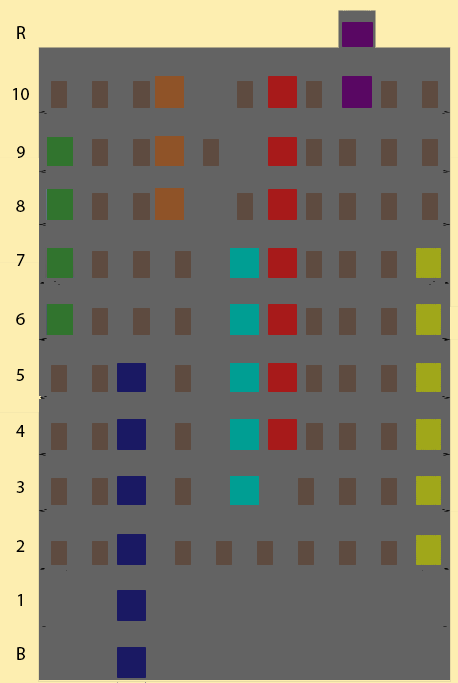
<style>
.page{position:relative;width:458px;height:683px;background:#636363}
.page>*{position:absolute;margin:0}
.t1{font:18px "MyriadPro-Regular";color:#010101}
</style>
<div class="page">
<p class="t1" style="left:17px;top:26px;width:9px;height:13px">R</p>
<p class="t1" style="left:13px;top:88px;width:16px;height:12px">10</p>
<p class="t1" style="left:17px;top:146px;width:8px;height:12px">9</p>
<p class="t1" style="left:16px;top:200px;width:9px;height:12px">8</p>
<p class="t1" style="left:17px;top:254px;width:8px;height:12px">7</p>
<p class="t1" style="left:16px;top:313px;width:9px;height:12px">6</p>
<p class="t1" style="left:16px;top:369px;width:8px;height:12px">5</p>
<p class="t1" style="left:16px;top:425px;width:9px;height:12px">4</p>
<p class="t1" style="left:16px;top:481px;width:8px;height:12px">3</p>
<p class="t1" style="left:16px;top:540px;width:9px;height:12px">2</p>
<p class="t1" style="left:18px;top:594px;width:4px;height:12px">1</p>
<p class="t1" style="left:17px;top:647px;width:8px;height:13px">B</p>
</div>
